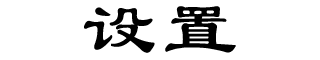
<style>
.page{position:relative;width:320px;height:60px;background:#ffffff}
.page>*{position:absolute;margin:0}
.t1{font:75px "LiSu";letter-spacing:0.075em;color:#000000}
</style>
<div class="page">
<p class="t1" style="left:84px;top:6px;width:152px;height:47px">设置</p>
</div>
